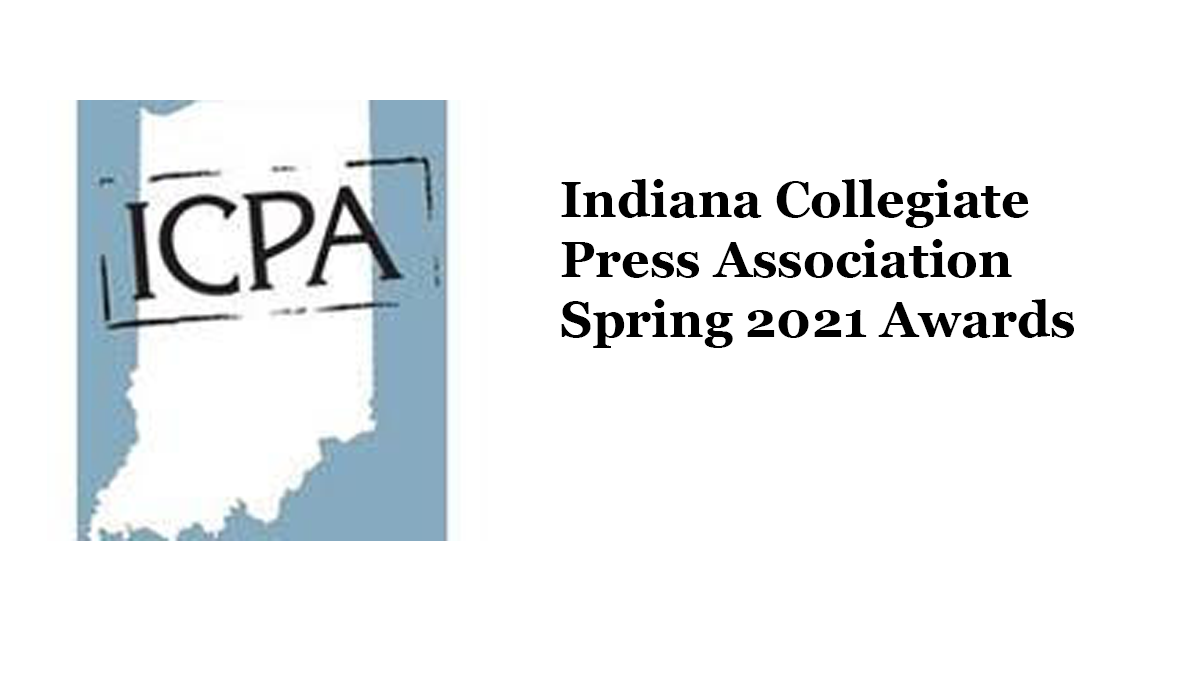
<style>
.page{position:relative;width:1200px;height:675px;background:#ffffff}
.page>*{position:absolute;margin:0}
.t1{font:50px "Georgia-Bold";color:#000000}
</style>
<div class="page">
<p class="t1" style="left:561px;top:179px;width:513px;height:169px">Indiana Collegiate Press Association Spring 2021 Awards</p>
</div>
